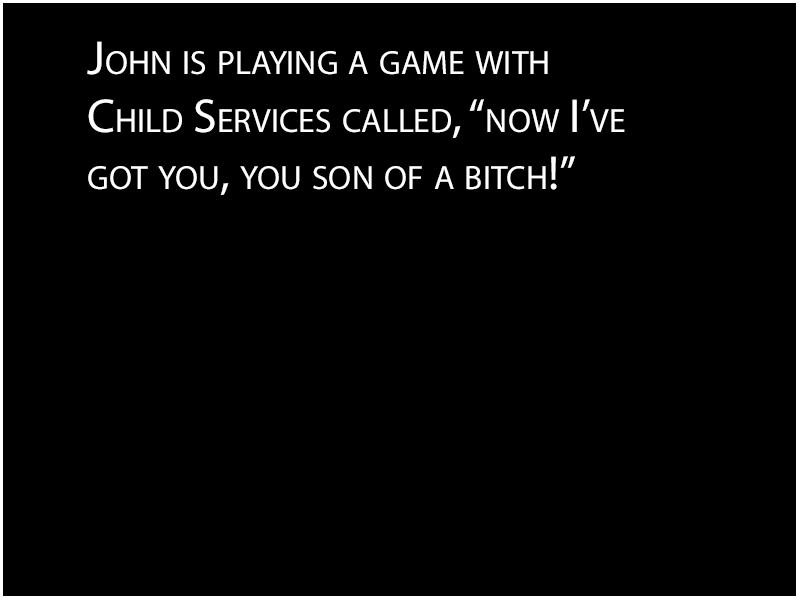
<style>
.page{position:relative;width:800px;height:600px;background:#000000}
.page>*{position:absolute;margin:0}
.t1{font:48px "MyriadPro-Regular";color:#ffffff;font-variant:small-caps}
</style>
<div class="page">
<p class="t1" style="left:87px;top:41px;width:538px;height:154px">John is playing a game with <br>Child Services called, “now I’ve<br>got you, you son of a bitch!”</p>
</div>
